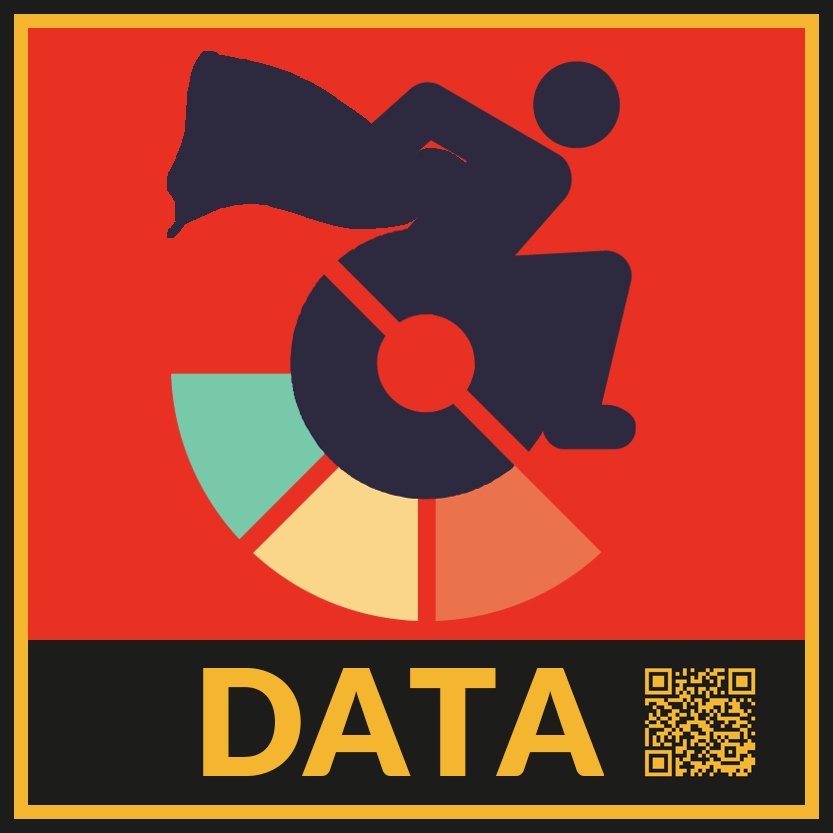
<style>
.page{position:relative;width:833px;height:833px;background:#e83023}
.page>*{position:absolute;margin:0}
.t1{font:146.5px "Lato-Black";color:#f3b62e}
</style>
<div class="page">
<p class="t1" style="left:203px;top:668px;width:401px;height:108px">DATA</p>
</div>
